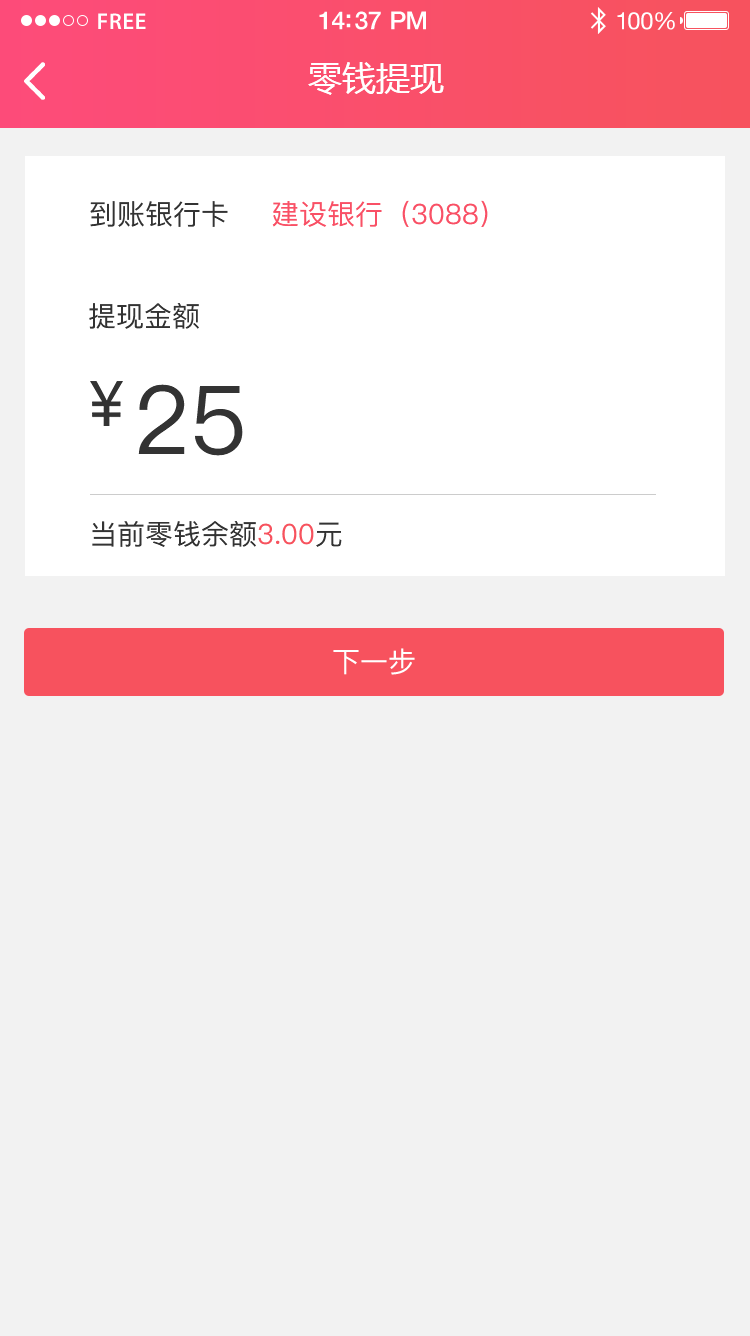
<style>
.page{position:relative;width:750px;height:1336px;background:#f2f2f2}
.page>*{position:absolute;margin:0}
.t1{font:23px "MyriadPro-Semibold";letter-spacing:0.02em;color:#ffffff}
.t2{font:25px "HelveticaNeue-Medium";letter-spacing:-0.02em;color:#ffffff}
.t3{font:24px "HelveticaNeue";letter-spacing:-0.02em;color:#ffffff}
.t4{font:34px "MicrosoftYaHei";color:#ffffff;text-transform:uppercase}
.t5{font:28px "PingFang-SC-Medium";color:#333333;text-transform:uppercase}
.t6{font:28px "PingFang-SC-Medium";color:#f95066;text-transform:uppercase}
.t7{font:95.2px "PingFang-SC-Medium";color:#333333;text-transform:uppercase}
.t8{font:28px "PingFang-SC-Medium";color:#f7525e;text-transform:uppercase}
.t9{font:28px "PingFang-SC-Medium";color:#ffffff;text-transform:uppercase}
</style>
<div class="page">
<p class="t1" style="left:98px;top:13px;width:48px;height:16px">FREE</p>
<p class="t2" style="left:319px;top:11px;width:107px;height:19px">14:37 PM</p>
<p class="t3" style="left:617px;top:12px;width:58px;height:18px">100%</p>
<p class="t4" style="left:308px;top:62px;width:136px;height:33px">零钱提现</p>
<p class="t5" style="left:90px;top:201px;width:138px;height:26px">到账银行卡</p>
<p class="t6" style="left:272px;top:200px;width:216px;height:27px">建设银行（3088）</p>
<p class="t5" style="left:89px;top:303px;width:110px;height:26px">提现金额</p>
<p class="t7" style="left:138px;top:384px;width:105px;height:72px">25</p>
<p class="t5" style="left:92px;top:521px;width:250px;height:26px">当前零钱余额<span class="t8">3.00</span>元</p>
<p class="t9" style="left:333px;top:648px;width:82px;height:27px">下一步</p>
</div>
